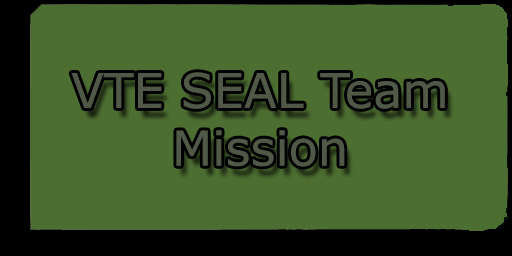
<style>
.page{position:relative;width:512px;height:256px;background:#4d6e31}
.page>*{position:absolute;margin:0}
.t1{font:48px "Verdana";color:#505948}
</style>
<div class="page">
<p class="t1" style="left:71px;top:72px;width:374px;height:95px;text-align:center">VTE SEAL Team<br>Mission</p>
</div>
